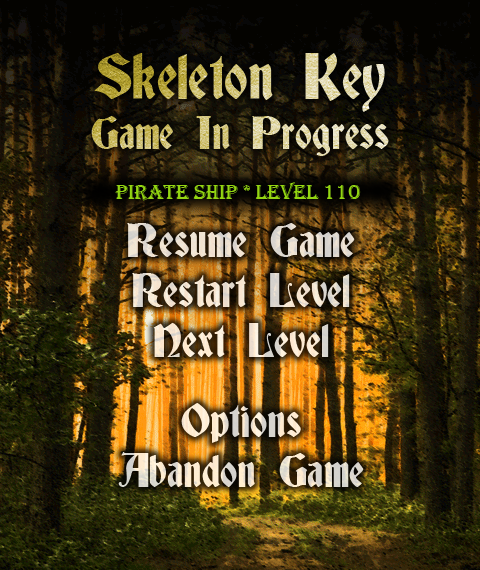
<style>
.page{position:relative;width:480px;height:570px}
.page>*{position:absolute;margin:0}
.t1{font:42px "Deutsch-Gothic"}
.t2{font:59px "Deutsch-Gothic"}
.t3{font:21px "Algerian";color:#93d512}
.t4{font:43px/50px "Deutsch-Gothic";color:#efe3d0}
.t5{font:43px/80px "Deutsch-Gothic";color:#efe3d0}
</style>
<div class="page">
<p class="t1" style="left:91px;top:53px;width:298px;height:103px;text-align:center"><span class="t2">Skeleton Key<br></span>Game In Progress</p>
<p class="t3" style="left:115px;top:182px;width:246px;height:19px">Pirate Ship * Level 110</p>
<p class="t4" style="left:118px;top:223px;width:246px;height:264px;text-align:center">Resume Game<br>Restart Level<br>Next Level<br><span class="t5">Options<br></span>Abandon Game</p>
</div>
